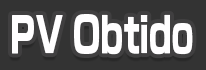
<style>
.page{position:relative;width:206px;height:70px;background:#333333}
.page>*{position:absolute;margin:0}
.t1{font:46.7px "NewRodinPro-EB";color:#fffeff;scale:0.66 1}
</style>
<div class="page">
<p class="t1" style="left:12px;top:14px;width:181px;height:41px">PV Obtido</p>
</div>
